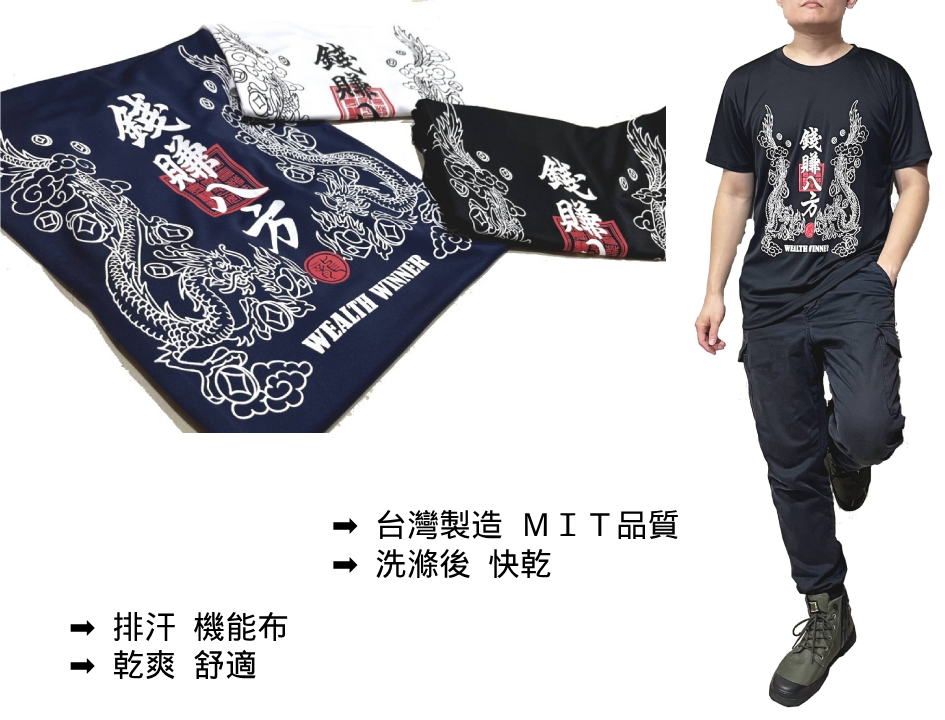
<style>
.page{position:relative;width:945px;height:720px;background:#ffffff}
.page>*{position:absolute;margin:0}
.t1{font:32px "DroidSansFallback";color:#000000}
.t2{font:32px "DejaVuSans";color:#000000}
</style>
<div class="page">
<p class="t1" style="left:333px;top:509px;width:345px;height:69px"><span class="t2">➡️</span>  台灣製造  ＭＩＴ品質<br><span class="t2">➡️</span>  洗滌後  快乾</p>
<p class="t1" style="left:70px;top:611px;width:218px;height:68px"><span class="t2">➡️</span>  排汗  機能布<br><span class="t2">➡️</span>  乾爽  舒適</p>
</div>
